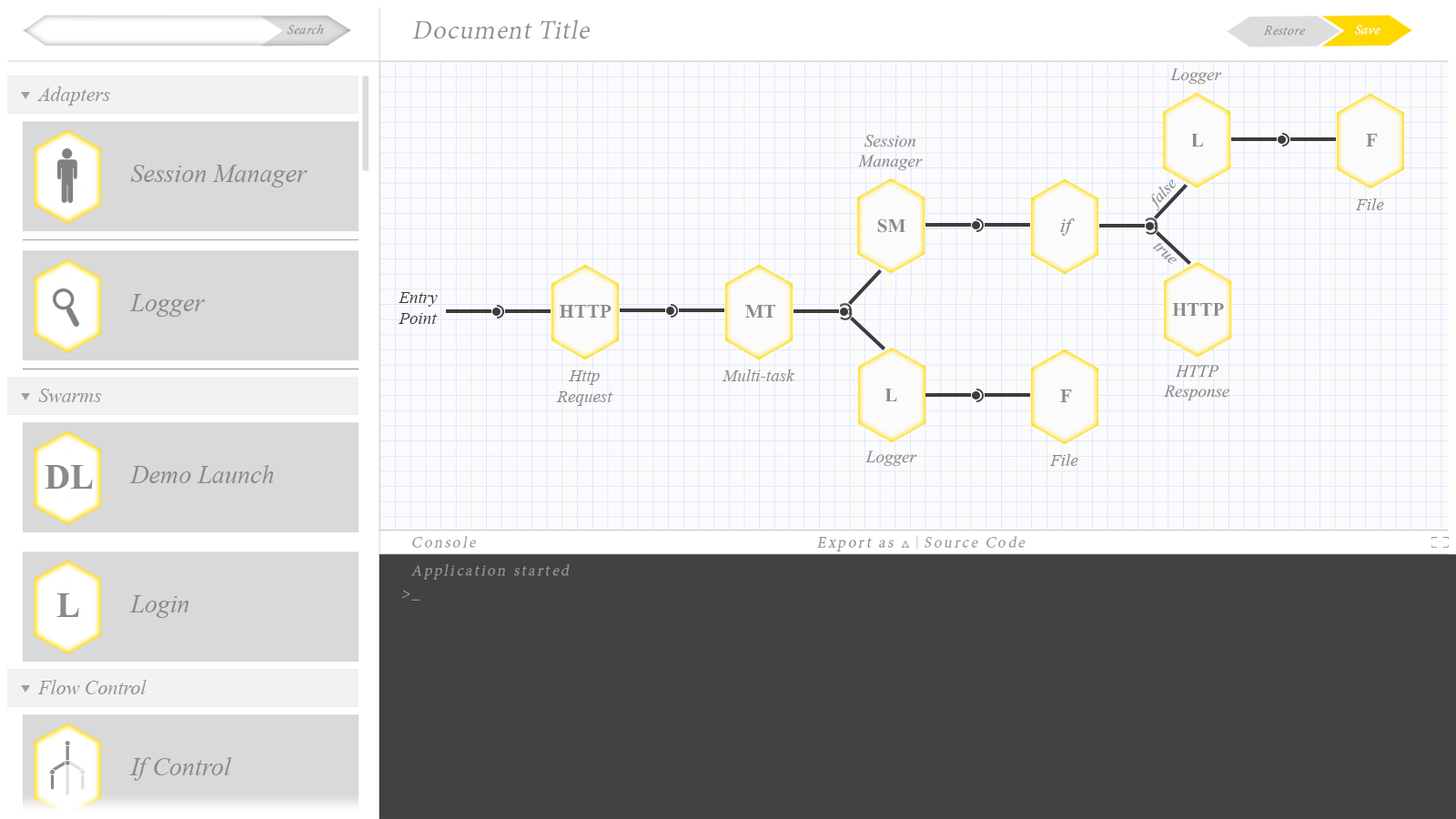
<style>
.page{position:relative;width:1456px;height:819px;background:#424242}
.page>*{position:absolute;margin:0}
.t1{font:17.2px "TimesNewRomanPS-ItalicMT";color:#8a8a8a}
.t2{font:20px "TimesNewRomanPS-ItalicMT";color:#949494}
.t3{font:19.1px "TimesNewRomanPS-BoldMT";color:#8a8a8a}
.t4{font:25.5px "TimesNewRomanPS-ItalicMT";color:#8a8a8a}
.t5{font:16.4px "TimesNewRomanPS-ItalicMT";color:#8a8a8a}
.t6{font:17.3px "TimesNewRomanPS-ItalicMT";color:#8a8a8a}
.t7{font:19.1px "TimesNewRomanPS-ItalicMT";color:#8a8a8a}
.t8{font:16.3px "TimesNewRomanPS-ItalicMT";color:#8a8a8a}
.t9{font:17.3px "TimesNewRomanPS-ItalicMT";color:#3c3c3c}
.t10{font:35.5px "TimesNewRomanPS-BoldMT";color:#8a8a8a}
</style>
<div class="page">
<p class="t1" style="left:1170px;top:68px;width:52px;height:17px">Logger</p>
<p class="t2" style="left:37px;top:86px;width:73px;height:20px">Adapters</p>
<p class="t1" style="left:858px;top:135px;width:65px;height:36px;text-align:center">Session<br>Manager</p>
<p class="t3" style="left:1191px;top:134px;width:12px;height:13px">L</p>
<p class="t3" style="left:1366px;top:134px;width:12px;height:13px">F</p>
<p class="t4" style="left:130px;top:165px;width:178px;height:22px">Session Manager</p>
<p class="t5" style="left:1151px;top:179px;width:25px;height:32px;rotate:-49deg">false</p>
<p class="t6" style="left:1356px;top:198px;width:28px;height:12px">File</p>
<p class="t3" style="left:877px;top:218px;width:28px;height:15px">SM</p>
<p class="t7" style="left:1060px;top:218px;width:15px;height:18px">if</p>
<p class="t8" style="left:1153px;top:243px;width:24px;height:21px;rotate:42deg">true</p>
<p class="t4" style="left:129px;top:294px;width:76px;height:23px">Logger</p>
<p class="t9" style="left:399px;top:292px;width:39px;height:32px">Entry<br>Point</p>
<p class="t3" style="left:559px;top:305px;width:53px;height:13px">HTTP</p>
<p class="t3" style="left:745px;top:305px;width:30px;height:13px">MT</p>
<p class="t3" style="left:1172px;top:303px;width:52px;height:13px">HTTP</p>
<p class="t1" style="left:1164px;top:365px;width:65px;height:36px;text-align:center">HTTP<br>Response</p>
<p class="t6" style="left:556px;top:370px;width:57px;height:36px;text-align:center">Http<br>Request</p>
<p class="t6" style="left:722px;top:369px;width:73px;height:12px">Multi-task</p>
<p class="t2" style="left:38px;top:389px;width:64px;height:13px">Swarms</p>
<p class="t3" style="left:885px;top:389px;width:12px;height:12px">L</p>
<p class="t3" style="left:1060px;top:389px;width:12px;height:13px">F</p>
<p class="t1" style="left:865px;top:450px;width:52px;height:17px">Logger</p>
<p class="t6" style="left:1050px;top:454px;width:28px;height:12px">File</p>
<p class="t10" style="left:45px;top:465px;width:48px;height:24px">DL</p>
<p class="t4" style="left:129px;top:465px;width:145px;height:18px">Demo Launch</p>
<p class="t10" style="left:56px;top:593px;width:23px;height:24px">L</p>
<p class="t4" style="left:129px;top:595px;width:60px;height:23px">Login</p>
<p class="t2" style="left:37px;top:680px;width:110px;height:14px">Flow Control</p>
<p class="t4" style="left:129px;top:757px;width:103px;height:24px">If Control</p>
</div>
